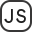
<style>
.page{position:relative;width:32px;height:32px;background:#ffffff}
.page>*{position:absolute;margin:0}
.t1{font:19.3px "Apercu-Mono";letter-spacing:0.001em;color:#202020}
</style>
<div class="page">
<p class="t1" style="left:4px;top:9px;width:22px;height:14px">JS</p>
</div>
